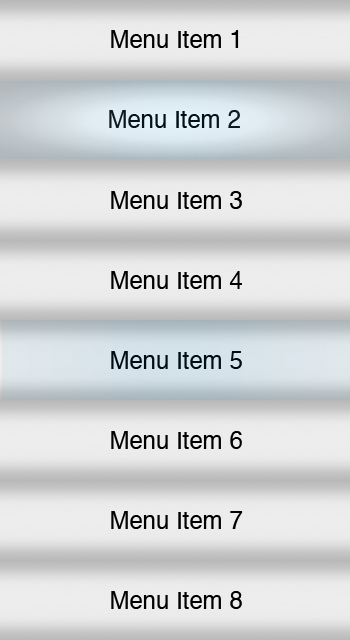
<style>
.page{position:relative;width:350px;height:640px}
.page>*{position:absolute;margin:0}
.t1{font:24px "Helvetica";color:#000000}
.t2{font:24px "Helvetica";color:#05121a}
</style>
<div class="page">
<p class="t1" style="left:111px;top:30px;width:128px;height:18px">Menu Item 1</p>
<p class="t2" style="left:109px;top:110px;width:131px;height:18px">Menu Item 2</p>
<p class="t1" style="left:111px;top:191px;width:131px;height:18px">Menu Item 3</p>
<p class="t1" style="left:111px;top:271px;width:131px;height:18px">Menu Item 4</p>
<p class="t1" style="left:111px;top:351px;width:131px;height:18px">Menu Item 5</p>
<p class="t1" style="left:111px;top:431px;width:131px;height:18px">Menu Item 6</p>
<p class="t1" style="left:111px;top:511px;width:132px;height:18px">Menu Item 7</p>
<p class="t1" style="left:111px;top:591px;width:131px;height:18px">Menu Item 8</p>
</div>
